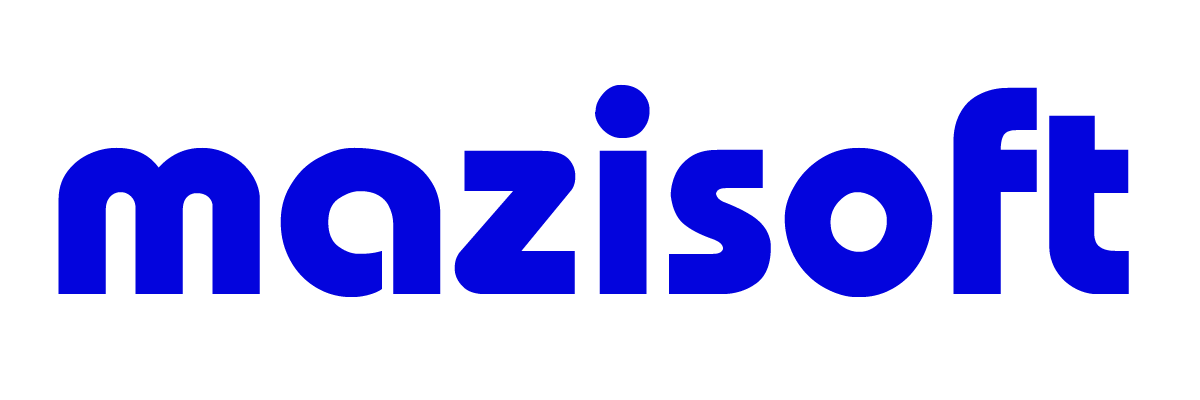
<style>
.page{position:relative;width:1200px;height:400px;background:#ffffff}
.page>*{position:absolute;margin:0}
.t1{font:293.4px "NVTBahamasHeavyBold";color:#0304dd}
</style>
<div class="page">
<p class="t1" style="left:58px;top:84px;width:1071px;height:213px">mazisoft</p>
</div>
